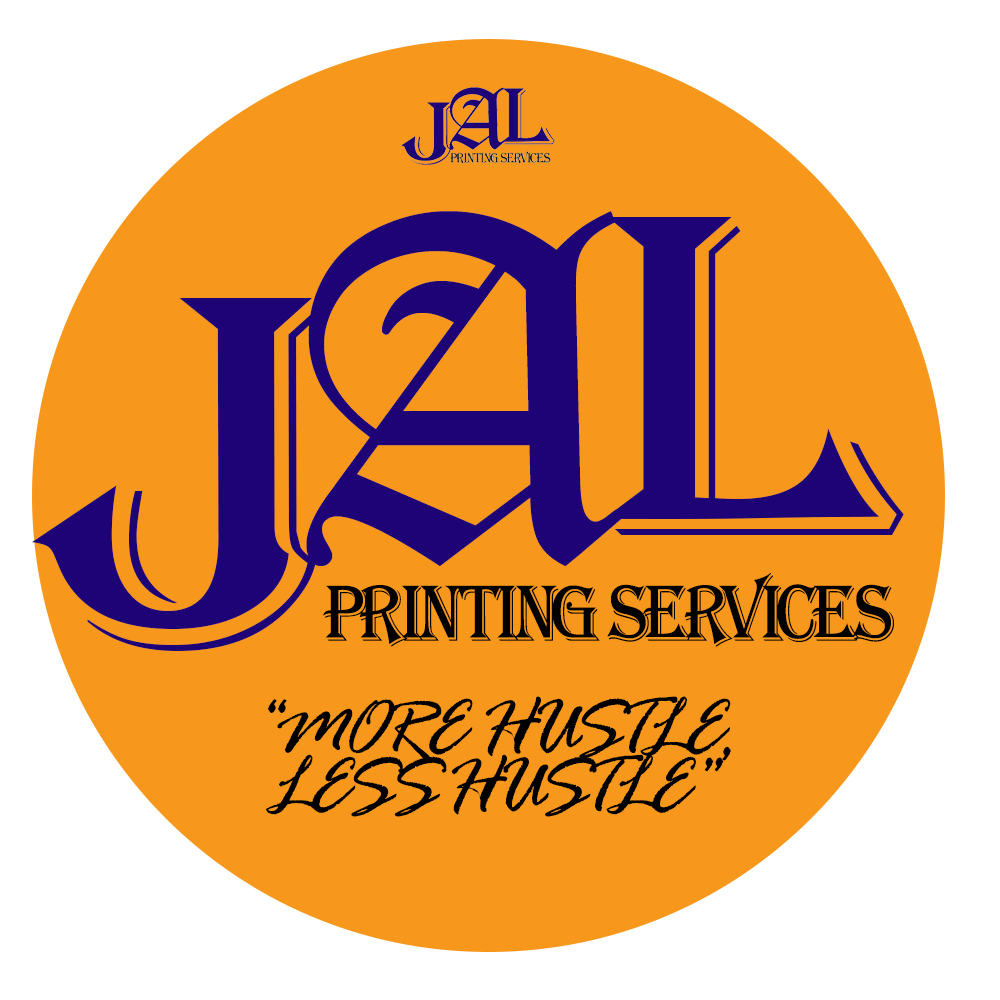
<style>
.page{position:relative;width:1000px;height:1000px;background:#f7981d}
.page>*{position:absolute;margin:0}
.t1{font:479.2px "OldEnglishTextMT";color:#1e0376;text-transform:uppercase}
.t2{font:477px "Algerian";color:#1e0376;text-transform:uppercase;scale:1.11 1}
.t3{font:517.6px "Algerian";color:#1e0376;text-transform:uppercase;scale:1.11 1}
.t4{font:82.4px "Algerian";letter-spacing:-0.075em;color:#000000;text-transform:uppercase;scale:0.9 1}
.t5{font:83.3px/58.3px "RageItalic";letter-spacing:-0.08em;color:#000000;text-transform:uppercase;scale:0.95 1}
</style>
<div class="page">
<p class="t1" style="left:306px;top:211px;width:318px;height:355px">A</p>
<p class="t2" style="left:607px;top:217px;width:297px;height:318px">L</p>
<p class="t3" style="left:32px;top:298px;width:292px;height:353px">J</p>
<p class="t4" style="left:323px;top:573px;width:571px;height:74px">printing services</p>
<p class="t5" style="left:266px;top:696px;width:465px;height:121px;text-align:center">“more hustle,<br>less hustle”</p>
</div>
